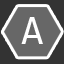
<style>
.page{position:relative;width:64px;height:64px;background:#676767}
.page>*{position:absolute;margin:0}
.t1{font:36px "BellGothicStd-Bold";color:#ffffff}
</style>
<div class="page">
<p class="t1" style="left:21px;top:17px;width:22px;height:27px">A</p>
</div>
